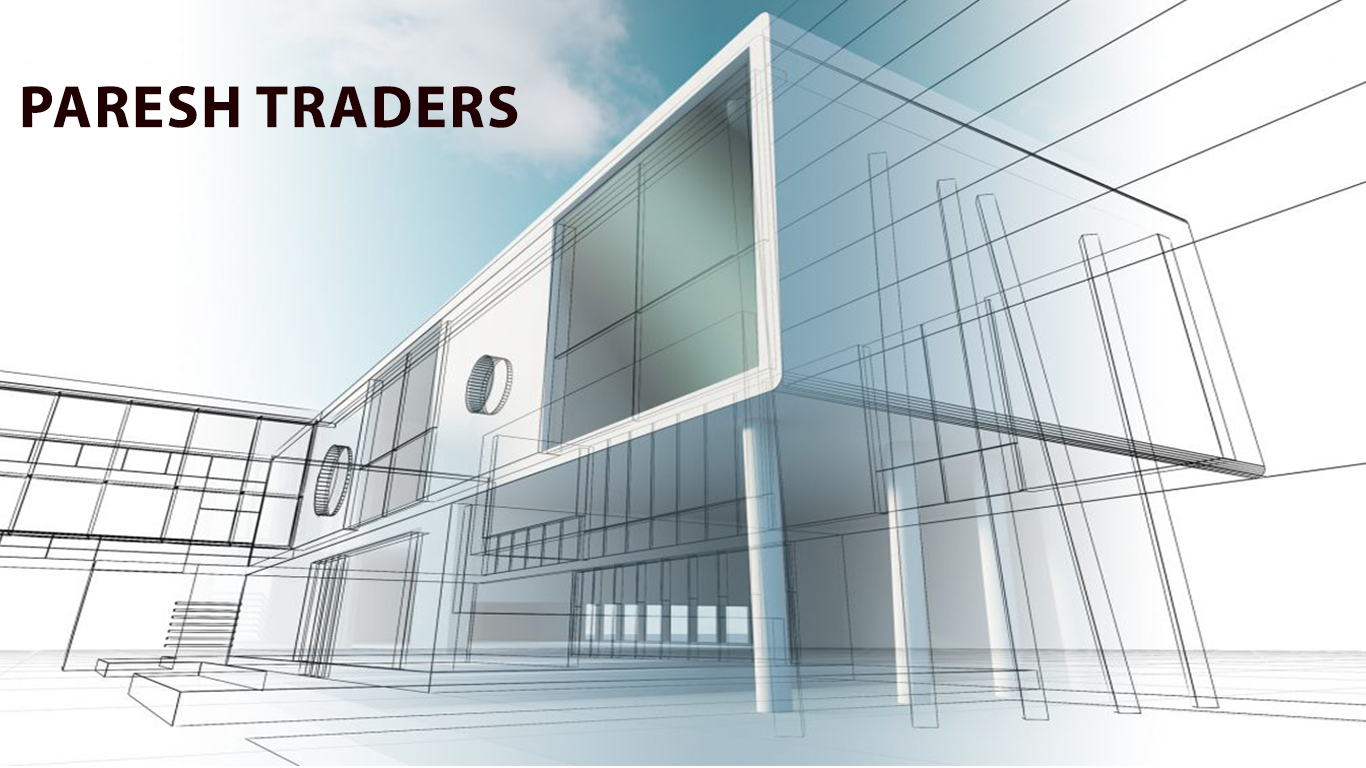
<style>
.page{position:relative;width:1366px;height:768px;background:#ffffff}
.page>*{position:absolute;margin:0}
.t1{font:60px "MyriadPro-Bold";letter-spacing:0.018em;color:#200000;text-transform:uppercase}
</style>
<div class="page">
<p class="t1" style="left:22px;top:86px;width:496px;height:42px">paresh traders</p>
</div>
